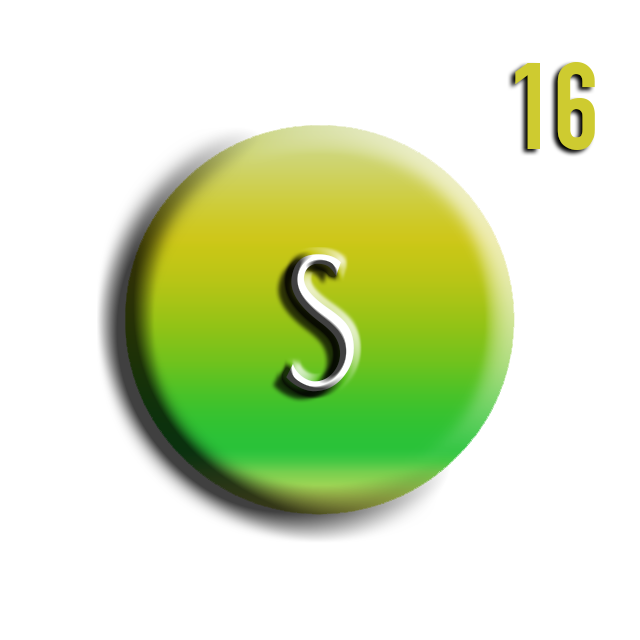
<style>
.page{position:relative;width:640px;height:640px;background:#ffffff}
.page>*{position:absolute;margin:0}
.t1{font:129px "TGL0-1451Engschrift";color:#cecb30}
.t2{font:194px "PortCredit-Regular"}
</style>
<div class="page">
<p class="t1" style="left:515px;top:62px;width:80px;height:88px">16</p>
<p class="t2" style="left:286px;top:254px;width:68px;height:138px">S</p>
</div>
